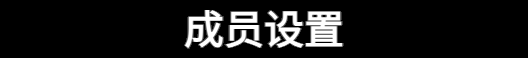
<style>
.page{position:relative;width:528px;height:58px;background:#000000}
.page>*{position:absolute;margin:0}
.t1{font:40px "WebPSD-18463539-0-Regular";color:#ffffff;font-weight:bold}
</style>
<div class="page">
<p class="t1" style="left:0px;top:0px;width:528px;height:58px">成员设置</p>
</div>
